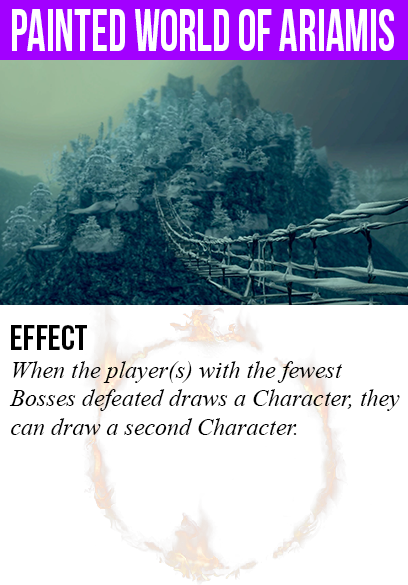
<style>
.page{position:relative;width:408px;height:585px;background:#ffffff}
.page>*{position:absolute;margin:0}
.t1{font:60px "BebasNeue";color:#ffffff;scale:0.77 1}
.t2{font:36px "BebasNeue";color:#000000}
.t3{font:24px "TimesNewRomanPS-ItalicMT";color:#000000}
</style>
<div class="page">
<p class="t1" style="left:12px;top:9px;width:382px;height:42px">painted world of ariamis</p>
<p class="t2" style="left:11px;top:325px;width:76px;height:25px">Effect</p>
<p class="t3" style="left:9px;top:361px;width:391px;height:74px">When the player(s) with the fewest<br>Bosses defeated draws a Character, they<br>can draw a second Character.</p>
</div>
